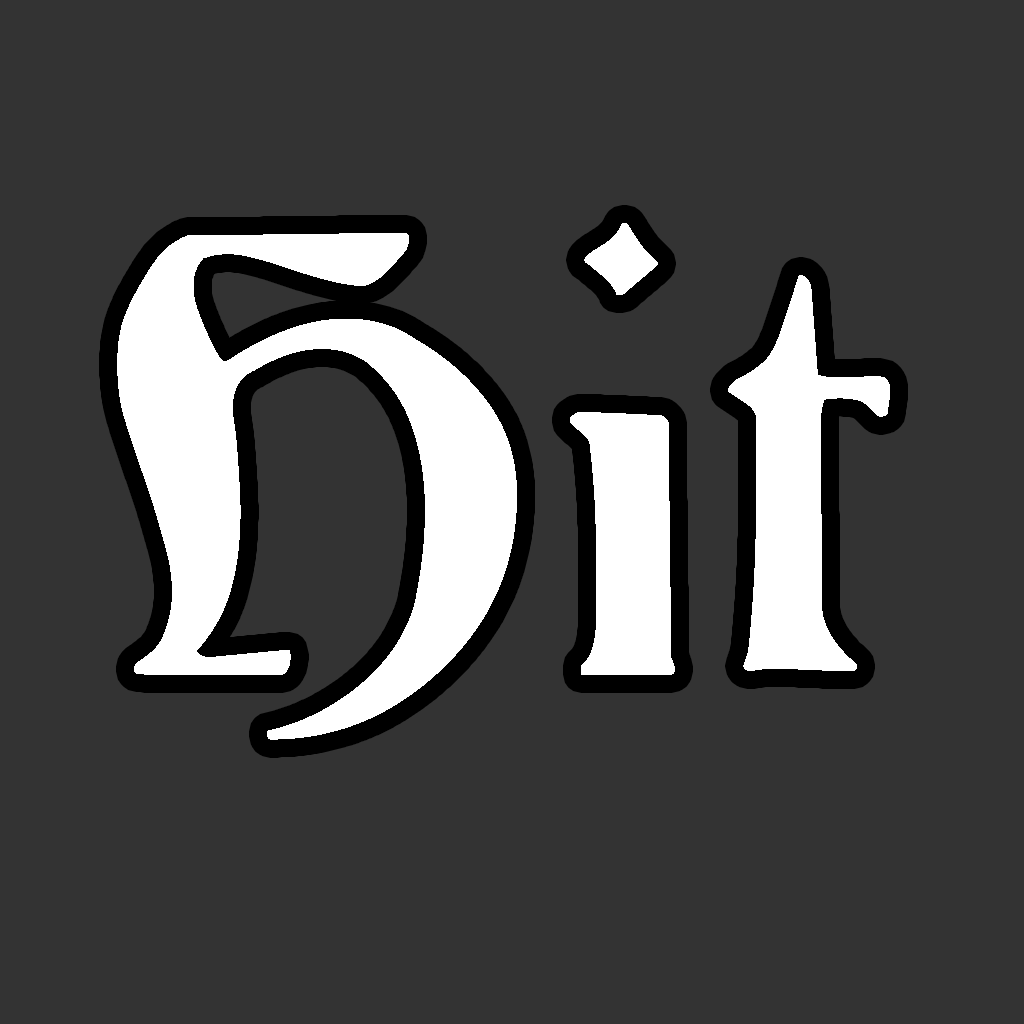
<style>
.page{position:relative;width:1024px;height:1024px;background:#333333}
.page>*{position:absolute;margin:0}
.t1{font:602.9px "Argos-Regular";letter-spacing:0.01em;color:#ffffff}
</style>
<div class="page">
<p class="t1" style="left:117px;top:223px;width:773px;height:517px">Hit</p>
</div>
